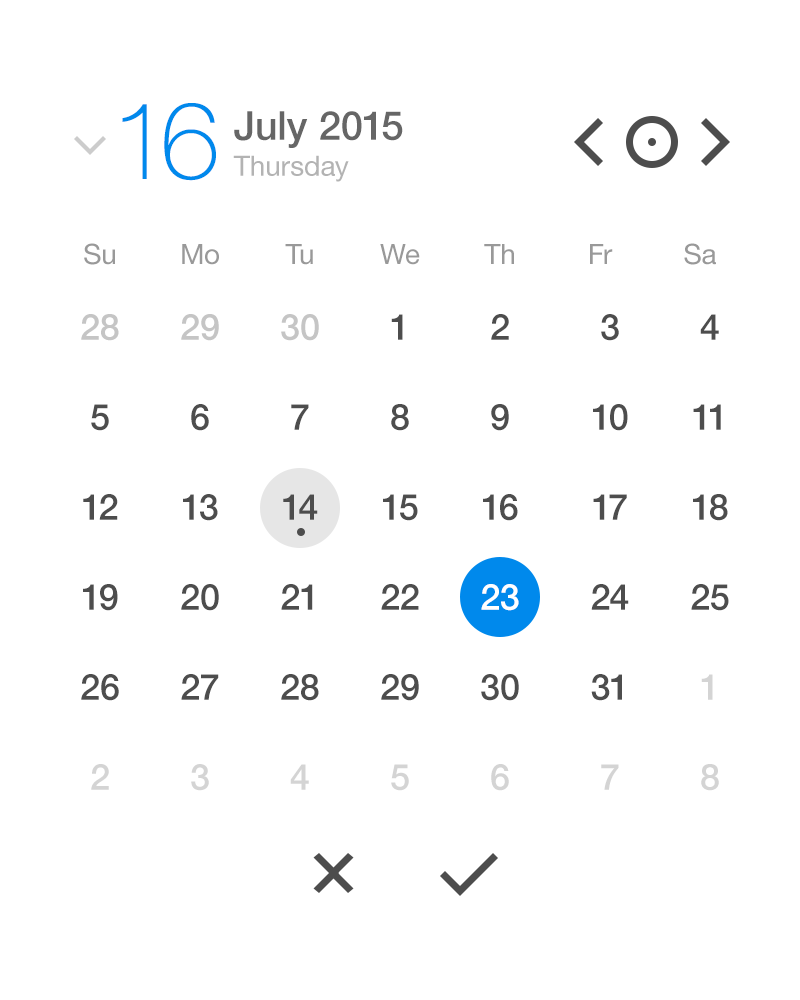
<style>
.page{position:relative;width:800px;height:1000px;background:#ffffff}
.page>*{position:absolute;margin:0}
.t1{font:108px "HelveticaNeue-Thin";color:#0089ec}
.t2{font:40px "HelveticaNeue-Medium";color:#666666}
.t3{font:28px "HelveticaNeue";color:#b3b3b3}
.t4{font:28px "HelveticaNeue";color:#999999}
.t5{font:36px "HelveticaNeue-Medium";color:#c5c5c5}
.t6{font:36px "HelveticaNeue-Medium";color:#4d4d4d}
.t7{font:36px "HelveticaNeue-Medium";color:#ffffff}
.t8{font:36px "HelveticaNeue-Medium";color:#d4d4d4}
</style>
<div class="page">
<p class="t1" style="left:122px;top:103px;width:94px;height:78px">16</p>
<p class="t2" style="left:234px;top:111px;width:169px;height:37px">July 2015</p>
<p class="t3" style="left:233px;top:155px;width:116px;height:27px">Thursday</p>
<p class="t4" style="left:84px;top:243px;width:31px;height:22px">Su</p>
<p class="t4" style="left:182px;top:244px;width:37px;height:21px">Mo</p>
<p class="t4" style="left:285px;top:244px;width:28px;height:21px">Tu</p>
<p class="t4" style="left:380px;top:244px;width:40px;height:21px">We</p>
<p class="t4" style="left:484px;top:244px;width:30px;height:20px">Th</p>
<p class="t4" style="left:590px;top:244px;width:23px;height:20px">Fr</p>
<p class="t4" style="left:684px;top:243px;width:32px;height:22px">Sa</p>
<p class="t5" style="left:81px;top:314px;width:38px;height:27px">28</p>
<p class="t5" style="left:181px;top:314px;width:38px;height:27px">29</p>
<p class="t5" style="left:281px;top:314px;width:38px;height:27px">30</p>
<p class="t6" style="left:391px;top:314px;width:12px;height:26px">1</p>
<p class="t6" style="left:491px;top:314px;width:18px;height:26px">2</p>
<p class="t6" style="left:601px;top:314px;width:18px;height:27px">3</p>
<p class="t6" style="left:700px;top:314px;width:19px;height:26px">4</p>
<p class="t6" style="left:91px;top:404px;width:18px;height:27px">5</p>
<p class="t6" style="left:191px;top:404px;width:18px;height:27px">6</p>
<p class="t6" style="left:291px;top:404px;width:18px;height:26px">7</p>
<p class="t6" style="left:391px;top:404px;width:18px;height:27px">8</p>
<p class="t6" style="left:491px;top:404px;width:18px;height:27px">9</p>
<p class="t6" style="left:593px;top:404px;width:35px;height:27px">10</p>
<p class="t6" style="left:693px;top:404px;width:28px;height:26px">11</p>
<p class="t6" style="left:83px;top:494px;width:35px;height:26px">12</p>
<p class="t6" style="left:183px;top:494px;width:35px;height:27px">13</p>
<p class="t6" style="left:283px;top:494px;width:35px;height:26px">14</p>
<p class="t6" style="left:283px;top:494px;width:35px;height:26px">14</p>
<p class="t6" style="left:383px;top:494px;width:35px;height:27px">15</p>
<p class="t6" style="left:483px;top:494px;width:35px;height:27px">16</p>
<p class="t6" style="left:593px;top:494px;width:34px;height:26px">17</p>
<p class="t6" style="left:693px;top:494px;width:35px;height:27px">18</p>
<p class="t6" style="left:83px;top:584px;width:35px;height:27px">19</p>
<p class="t6" style="left:181px;top:584px;width:38px;height:27px">20</p>
<p class="t6" style="left:281px;top:584px;width:32px;height:26px">21</p>
<p class="t6" style="left:381px;top:584px;width:38px;height:26px">22</p>
<p class="t7" style="left:481px;top:584px;width:38px;height:27px">23</p>
<p class="t7" style="left:481px;top:584px;width:38px;height:27px">23</p>
<p class="t6" style="left:591px;top:584px;width:38px;height:26px">24</p>
<p class="t6" style="left:691px;top:584px;width:38px;height:27px">25</p>
<p class="t6" style="left:81px;top:674px;width:38px;height:27px">26</p>
<p class="t6" style="left:181px;top:674px;width:38px;height:26px">27</p>
<p class="t6" style="left:281px;top:674px;width:38px;height:27px">28</p>
<p class="t6" style="left:381px;top:674px;width:38px;height:27px">29</p>
<p class="t6" style="left:481px;top:674px;width:38px;height:27px">30</p>
<p class="t6" style="left:591px;top:674px;width:31px;height:27px">31</p>
<p class="t8" style="left:701px;top:674px;width:12px;height:26px">1</p>
<p class="t8" style="left:91px;top:764px;width:18px;height:26px">2</p>
<p class="t8" style="left:191px;top:764px;width:18px;height:27px">3</p>
<p class="t8" style="left:290px;top:764px;width:19px;height:26px">4</p>
<p class="t8" style="left:391px;top:764px;width:18px;height:27px">5</p>
<p class="t8" style="left:491px;top:764px;width:18px;height:27px">6</p>
<p class="t8" style="left:601px;top:764px;width:18px;height:26px">7</p>
<p class="t8" style="left:701px;top:764px;width:18px;height:27px">8</p>
</div>
